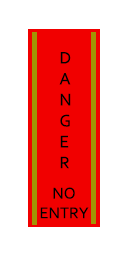
<style>
.page{position:relative;width:128px;height:256px;background:#ffffff}
.page>*{position:absolute;margin:0}
.t1{font:17.5px "Corbel";color:#000000}
.t2{font:16.4px "Corbel";color:#000000}
</style>
<div class="page">
<p class="t1" style="left:59px;top:52px;width:12px;height:117px">D<br>A<br>N<br>G<br>E<br>R</p>
<p class="t2" style="left:40px;top:187px;width:49px;height:32px;text-align:center">NO<br>ENTRY</p>
</div>
